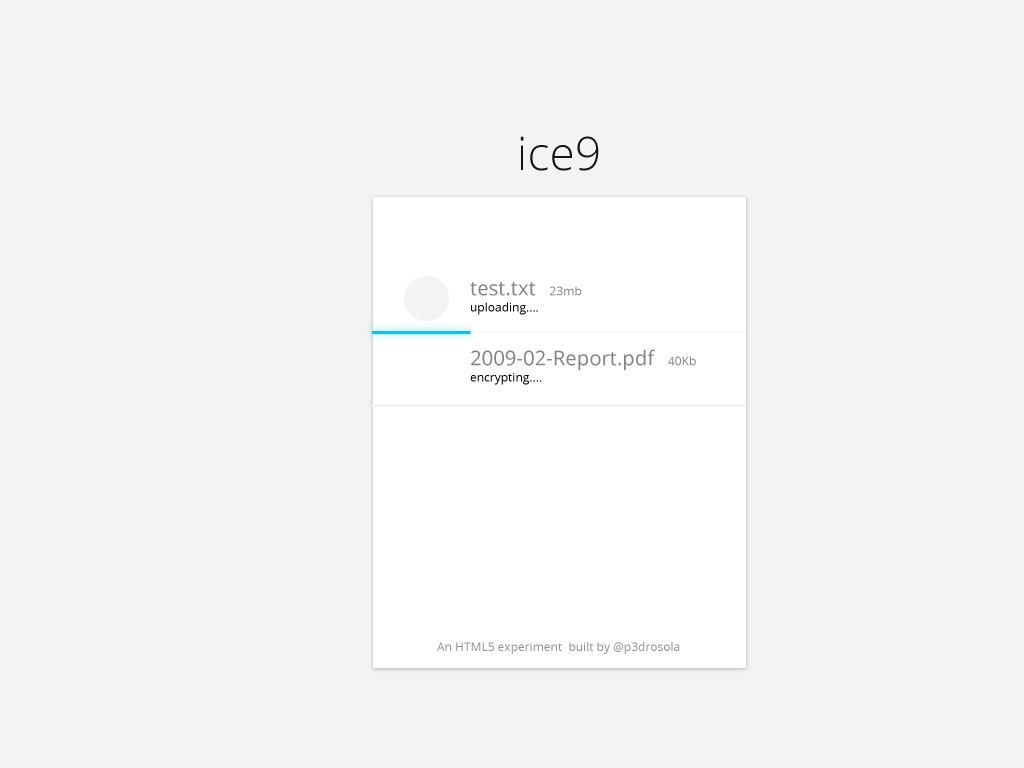
<style>
.page{position:relative;width:1024px;height:768px;background:#f3f3f3}
.page>*{position:absolute;margin:0}
.t1{font:46.3px "OpenSans-Light";color:#151515}
.t2{font:12px/16.5px "OpenSans";color:#000000}
.t3{font:20.3px/16.5px "OpenSans";color:#848484}
.t4{font:12px/16.5px "OpenSans";color:#848484}
.t5{font:12px "OpenSans";color:#919191}
</style>
<div class="page">
<p class="t1" style="left:520px;top:136px;width:79px;height:35px">ice9</p>
<p class="t1" style="left:520px;top:136px;width:79px;height:35px">ice9</p>
<p class="t2" style="left:470px;top:282px;width:112px;height:33px"><span class="t3">test.txt  </span><span class="t4"> 23mb<br></span>encrypting....</p>
<p class="t2" style="left:470px;top:282px;width:112px;height:33px"><span class="t3">test.txt  </span><span class="t4"> 23mb<br></span>uploading....</p>
<p class="t3" style="left:470px;top:349px;width:226px;height:36px">2009-02-Report.pdf  <span class="t4"> 40Kb<br></span><span class="t2">encrypting....</span></p>
<p class="t5" style="left:437px;top:642px;width:243px;height:12px">An HTML5 experiment  built by @p3drosola</p>
<p class="t5" style="left:437px;top:642px;width:243px;height:12px">An HTML5 experiment  built by @p3drosola</p>
</div>
